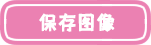
<style>
.page{position:relative;width:151px;height:45px;background:#eb81b2}
.page>*{position:absolute;margin:0}
.t1{font:12px "shetumodengxiaofangti";color:#ffffff;font-weight:bold;scale:0.94 1}
</style>
<div class="page">
<p class="t1" style="left:39px;top:13px;width:76px;height:19px">保存图像</p>
</div>
